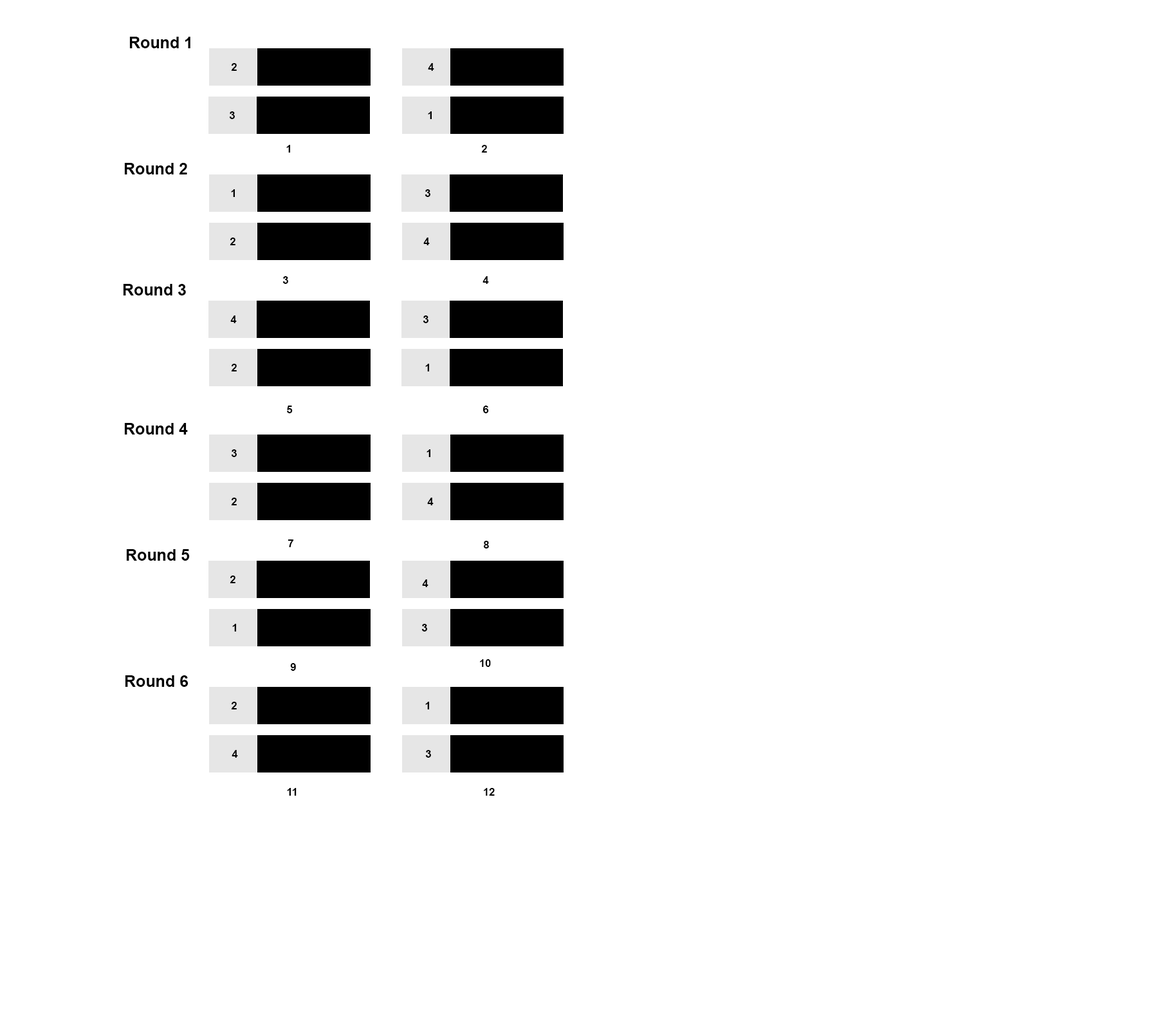
<style>
.page{position:relative;width:1158px;height:1030px;background:#ffffff}
.page>*{position:absolute;margin:0}
.t1{font:16.1px "Arial-BoldMT";color:#000000}
.t2{font:10.7px "Arial-BoldMT";color:#000000}
</style>
<div class="page">
<p class="t1" style="left:129px;top:37px;width:61px;height:11px">Round 1</p>
<p class="t2" style="left:231px;top:63px;width:6px;height:8px">2</p>
<p class="t2" style="left:428px;top:63px;width:6px;height:8px">4</p>
<p class="t2" style="left:229px;top:111px;width:6px;height:8px">3</p>
<p class="t2" style="left:428px;top:111px;width:4px;height:8px">1</p>
<p class="t2" style="left:286px;top:145px;width:4px;height:7px">1</p>
<p class="t2" style="left:481px;top:145px;width:6px;height:7px">2</p>
<p class="t1" style="left:124px;top:163px;width:63px;height:11px">Round 2</p>
<p class="t2" style="left:231px;top:189px;width:4px;height:8px">1</p>
<p class="t2" style="left:425px;top:189px;width:5px;height:8px">3</p>
<p class="t2" style="left:230px;top:237px;width:6px;height:8px">2</p>
<p class="t2" style="left:423px;top:237px;width:7px;height:8px">4</p>
<p class="t2" style="left:282px;top:276px;width:6px;height:8px">3</p>
<p class="t2" style="left:483px;top:276px;width:6px;height:8px">4</p>
<p class="t1" style="left:123px;top:284px;width:63px;height:11px">Round 3</p>
<p class="t2" style="left:230px;top:315px;width:7px;height:8px">4</p>
<p class="t2" style="left:423px;top:315px;width:6px;height:8px">3</p>
<p class="t2" style="left:231px;top:364px;width:6px;height:7px">2</p>
<p class="t2" style="left:425px;top:364px;width:4px;height:7px">1</p>
<p class="t2" style="left:287px;top:405px;width:6px;height:8px">5</p>
<p class="t2" style="left:483px;top:405px;width:6px;height:8px">6</p>
<p class="t1" style="left:124px;top:423px;width:64px;height:11px">Round 4</p>
<p class="t2" style="left:231px;top:449px;width:6px;height:8px">3</p>
<p class="t2" style="left:427px;top:449px;width:3px;height:8px">1</p>
<p class="t2" style="left:231px;top:497px;width:6px;height:8px">2</p>
<p class="t2" style="left:427px;top:497px;width:7px;height:8px">4</p>
<p class="t2" style="left:288px;top:539px;width:5px;height:8px">7</p>
<p class="t2" style="left:483px;top:541px;width:6px;height:7px">8</p>
<p class="t1" style="left:126px;top:549px;width:64px;height:11px">Round 5</p>
<p class="t2" style="left:230px;top:575px;width:6px;height:8px">2</p>
<p class="t2" style="left:422px;top:579px;width:7px;height:8px">4</p>
<p class="t2" style="left:232px;top:624px;width:4px;height:7px">1</p>
<p class="t2" style="left:421px;top:624px;width:6px;height:7px">3</p>
<p class="t2" style="left:290px;top:663px;width:6px;height:7px">9</p>
<p class="t2" style="left:480px;top:659px;width:11px;height:8px">10</p>
<p class="t1" style="left:125px;top:675px;width:64px;height:12px">Round 6</p>
<p class="t2" style="left:231px;top:701px;width:6px;height:8px">2</p>
<p class="t2" style="left:425px;top:701px;width:4px;height:8px">1</p>
<p class="t2" style="left:232px;top:750px;width:6px;height:7px">4</p>
<p class="t2" style="left:425px;top:750px;width:6px;height:7px">3</p>
<p class="t2" style="left:287px;top:788px;width:10px;height:7px">11</p>
<p class="t2" style="left:484px;top:788px;width:11px;height:7px">12</p>
</div>
